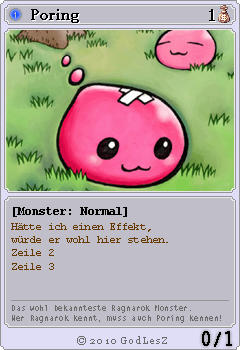
<style>
.page{position:relative;width:240px;height:350px;background:#bfbec9}
.page>*{position:absolute;margin:0}
.t1{font:8px "ArialMT";color:#bfbec9}
.t2{font:15px "Georgia";color:#000000;font-weight:bold}
.t3{font:16px "Tahoma";color:#000000;font-weight:bold}
.t4{font:12px "CourierNewPS-BoldMT";color:#010100}
.t5{font:11px "CourierNewPSMT";letter-spacing:-0.08em;color:#653900}
.t6{font:7.7px/10px "LetterGothicStd";color:#6b6b6b}
.t7{font:10px "Georgia";letter-spacing:0.12em;color:#6b6b6b}
.t8{font:18px "LetterGothicStd";color:#000000;font-weight:bold}
</style>
<div class="page">
<p class="t1" style="left:14px;top:12px;width:2px;height:6px">1</p>
<p class="t2" style="left:31px;top:9px;width:48px;height:14px">Poring</p>
<p class="t3" style="left:209px;top:9px;width:6px;height:12px">1</p>
<p class="t4" style="left:13px;top:207px;width:114px;height:10px">[Monster: Normal]</p>
<p class="t5" style="left:11px;top:223px;width:157px;height:47px">Hätte ich einen Effekt, <br>würde er wohl hier stehen.<br>Zeile 2<br>Zeile 3</p>
<p class="t6" style="left:12px;top:305px;width:209px;height:18px">Das wohl bekannteste Ragnarok Monster.<br>Wer Ragnarok kennt, muss auch Poring kennen!</p>
<p class="t7" style="left:77px;top:336px;width:90px;height:9px">© 2010 GodLesZ</p>
<p class="t8" style="left:202px;top:331px;width:30px;height:16px">0/1</p>
</div>
